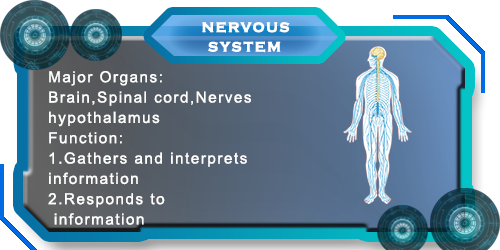
<style>
.page{position:relative;width:500px;height:250px}
.page>*{position:absolute;margin:0}
.t1{font:14px "CopperplateGothic-Bold";letter-spacing:0.1em;color:#ffffff;font-weight:bold}
.t2{font:15.2px/20.3px "ArialMT";letter-spacing:0.1em;color:#ffffff}
</style>
<div class="page">
<p class="t1" style="left:202px;top:21px;width:88px;height:12px">NERVOUS</p>
<p class="t1" style="left:208px;top:41px;width:73px;height:12px">SYSTEM</p>
<p class="t2" style="left:48px;top:71px;width:203px;height:154px">Major Organs:<br>Brain,Spinal cord,Nerves<br>hypothalamus   <br>Function: <br>1.Gathers and interprets<br>information<br>2.Responds to<br> information<br>3. helps maintain<br> homeostasis</p>
</div>
